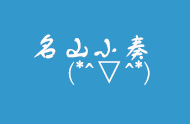
<style>
.page{position:relative;width:190px;height:124px;background:#3399cc}
.page>*{position:absolute;margin:0}
.t1{font:30px "FZSTK--GBK1-0";color:#fdfbfb}
</style>
<div class="page">
<p class="t1" style="left:34px;top:34px;width:114px;height:27px">名山小奏</p>
<p class="t1" style="left:68px;top:60px;width:82px;height:25px">(*^▽^*)</p>
</div>
